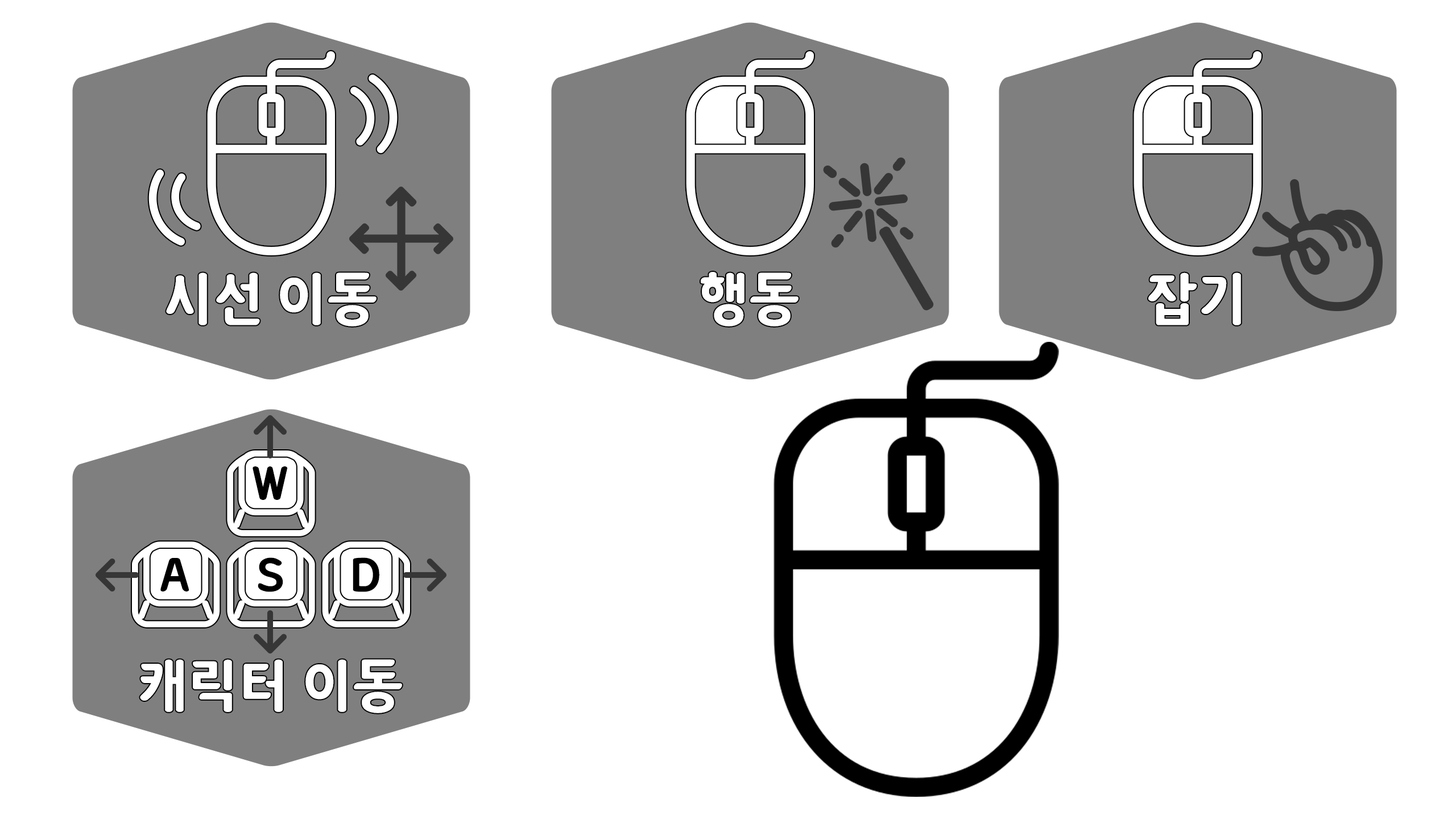
<style>
.page{position:relative;width:1456px;height:819px;background:#ffffff}
.page>*{position:absolute;margin:0}
.t1{font:56.9px "netmarbleB";color:#ffffff}
.t2{font:42.7px "netmarbleB";letter-spacing:0.05em;color:#000000}
</style>
<div class="page">
<p class="t1" style="left:166px;top:272px;width:211px;height:54px">시선 이동</p>
<p class="t1" style="left:701px;top:272px;width:98px;height:54px">행동</p>
<p class="t1" style="left:1148px;top:272px;width:93px;height:53px">잡기</p>
<p class="t2" style="left:253px;top:466px;width:35px;height:34px">W</p>
<p class="t2" style="left:160px;top:558px;width:29px;height:33px">A</p>
<p class="t2" style="left:258px;top:557px;width:25px;height:35px">S</p>
<p class="t2" style="left:353px;top:557px;width:26px;height:35px">D</p>
<p class="t1" style="left:140px;top:659px;width:262px;height:54px">캐릭터 이동</p>
</div>
